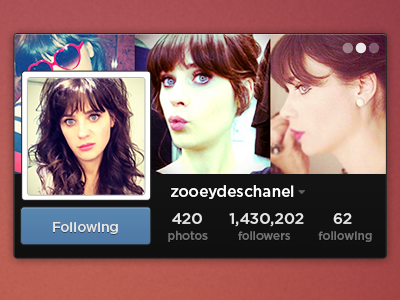
<style>
.page{position:relative;width:400px;height:300px}
.page>*{position:absolute;margin:0}
.t1{font:15.4px "Gotham-Medium";color:#ffffff}
.t2{font:13.5px "Gotham-Medium";color:#e5e5e5}
.t3{font:15.4px "Gotham-Medium";color:#e5e5e5}
.t4{font:11.6px "Gotham-Medium";color:#707070}
</style>
<div class="page">
<p class="t1" style="left:171px;top:185px;width:123px;height:14px">zooeydeschanel</p>
<p class="t2" style="left:53px;top:222px;width:65px;height:12px">Following</p>
<p class="t3" style="left:172px;top:213px;width:30px;height:11px">420</p>
<p class="t3" style="left:229px;top:213px;width:75px;height:14px">1,430,202</p>
<p class="t3" style="left:333px;top:213px;width:19px;height:11px">62</p>
<p class="t4" style="left:168px;top:230px;width:40px;height:12px">photos</p>
<p class="t4" style="left:238px;top:231px;width:52px;height:9px">followers</p>
<p class="t4" style="left:318px;top:231px;width:54px;height:11px">following</p>
</div>
